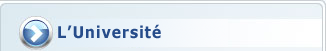
<style>
.page{position:relative;width:326px;height:51px}
.page>*{position:absolute;margin:0}
.t1{font:16.2px "Verdana-Bold";letter-spacing:0.05em;color:#264c8a;scale:0.89 1}
</style>
<div class="page">
<p class="t1" style="left:58px;top:24px;width:103px;height:15px">L’Université</p>
</div>
